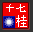
<style>
.page{position:relative;width:33px;height:32px;background:#f20000}
.page>*{position:absolute;margin:0}
.t1{font:10.4px "SimSun";color:#ffffff}
.t2{font:11.7px "SimSun";color:#ffffff}
</style>
<div class="page">
<p class="t1" style="left:6px;top:4px;width:20px;height:8px">十七</p>
<p class="t2" style="left:16px;top:15px;width:11px;height:12px">桂</p>
</div>
